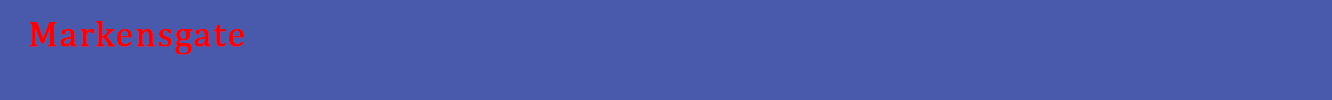
<style>
.page{position:relative;width:1332px;height:100px;background:#495aac}
.page>*{position:absolute;margin:0}
.t1{font:36px "Cambria";letter-spacing:0.025em;color:#fb0000;font-weight:bold}
</style>
<div class="page">
<p class="t1" style="left:30px;top:21px;width:215px;height:34px">Markensgate</p>
</div>
